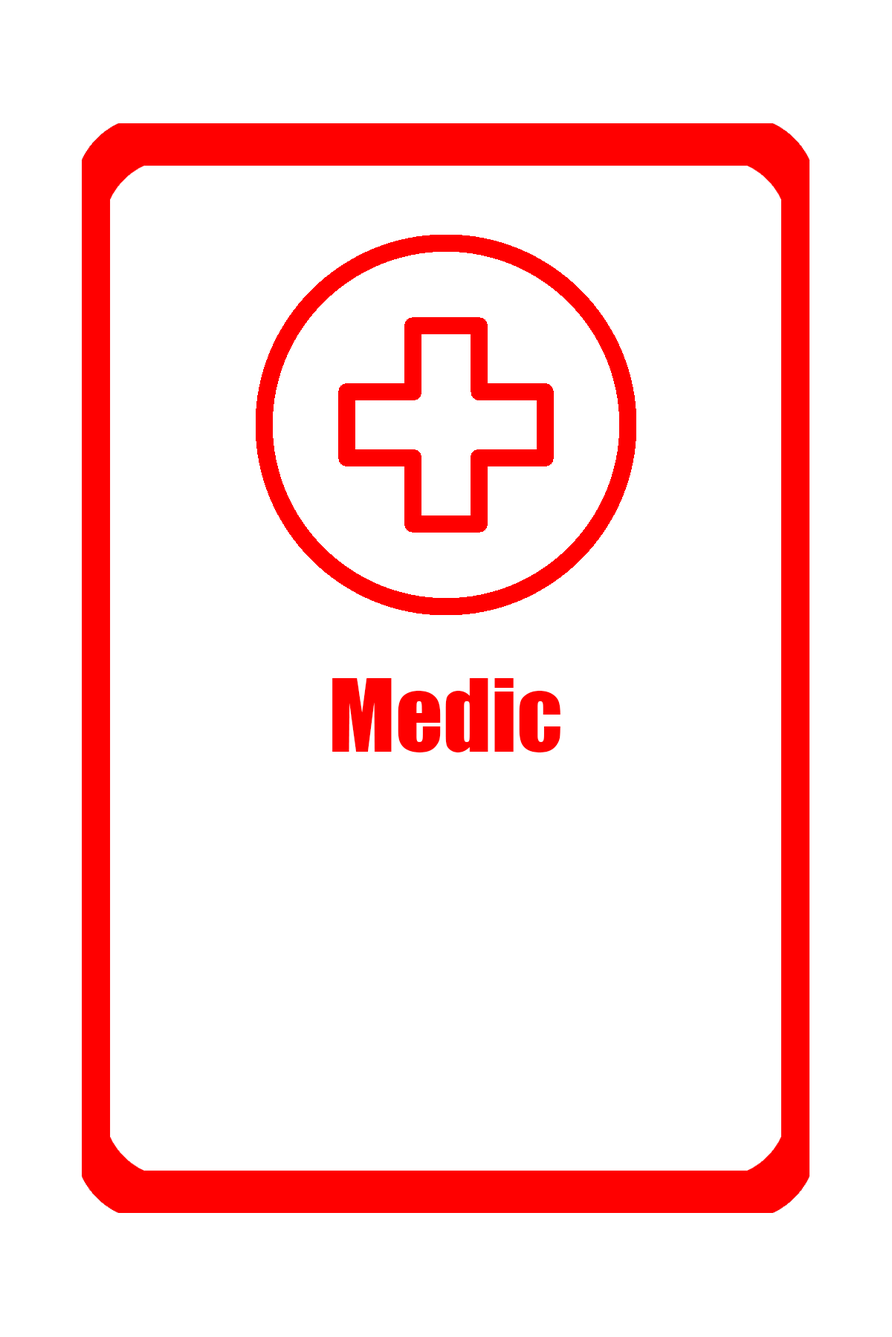
<style>
.page{position:relative;width:892px;height:1337px;background:#ffffff}
.page>*{position:absolute;margin:0}
.t1{font:92.9px "Impact";color:#ff0000}
</style>
<div class="page">
<p class="t1" style="left:332px;top:678px;width:228px;height:75px">Medic</p>
</div>
